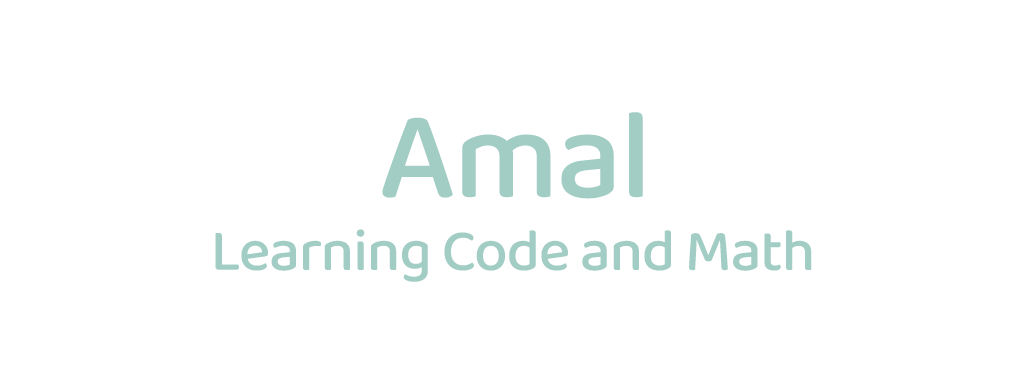
<style>
.page{position:relative;width:1024px;height:384px;background:#ffffff}
.page>*{position:absolute;margin:0}
.t1{font:128px "BalooThambi2-Medium";letter-spacing:-0.02em;color:#a2cdc4}
.t2{font:60px "BalooThambi2-Medium";letter-spacing:-0.02em;color:#a2cdc4}
</style>
<div class="page">
<p class="t1" style="left:382px;top:112px;width:261px;height:87px">Amal</p>
<p class="t2" style="left:215px;top:229px;width:597px;height:53px">Learning Code and Math</p>
</div>
